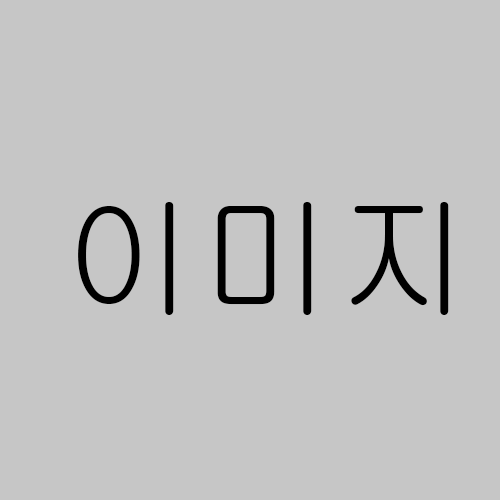
<style>
.page{position:relative;width:500px;height:500px;background:#c6c6c6}
.page>*{position:absolute;margin:0}
.t1{font:137.7px "Gulim";color:#000000}
</style>
<div class="page">
<p class="t1" style="left:78px;top:202px;width:371px;height:113px">이미지</p>
</div>
